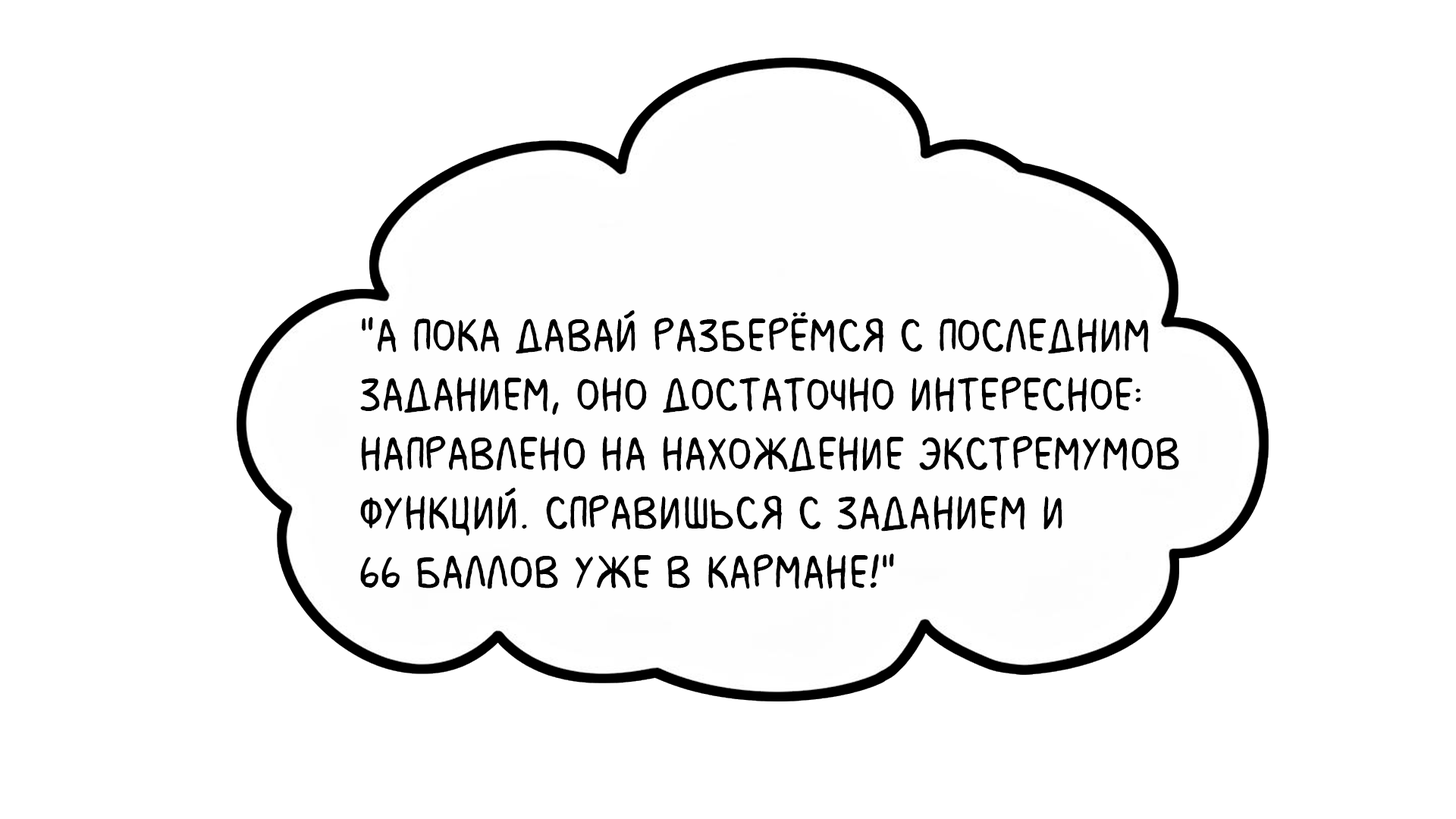
<style>
.page{position:relative;width:1456px;height:819px;background:#ffffff}
.page>*{position:absolute;margin:0}
.t1{font:49.3px "MilkMustacheBB";color:#000000}
</style>
<div class="page">
<p class="t1" style="left:360px;top:310px;width:819px;height:280px">"А пока давай разберёмся с последним <br>заданием, оно достаточно интересное: <br>направлено на нахождение экстремумов <br>функций. Справишься с заданием и <br>66 баллов уже в кармане!"</p>
</div>
